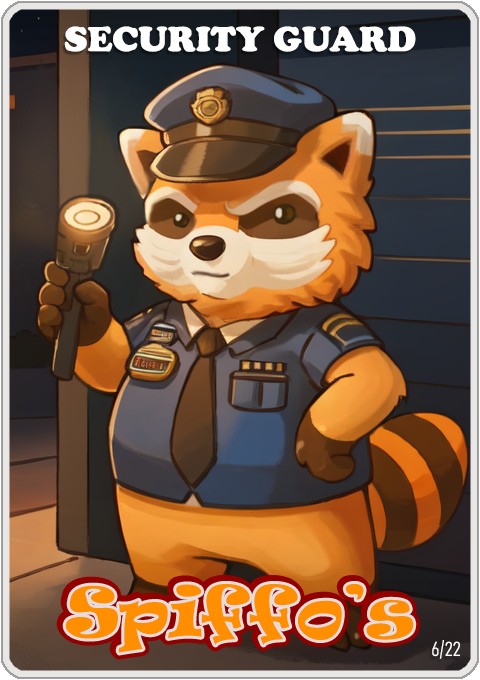
<style>
.page{position:relative;width:480px;height:680px}
.page>*{position:absolute;margin:0}
.t1{font:36px "CooperBlack";color:#ffffff}
.t2{font:65px "Ravie";color:#ff8e00}
.t3{font:20px "Bahnschrift-LightCondensed";color:#ffffff}
</style>
<div class="page">
<p class="t1" style="left:64px;top:26px;width:352px;height:26px">SECURITY GUARD</p>
<p class="t2" style="left:65px;top:584px;width:349px;height:69px">Spiffo’s</p>
<p class="t3" style="left:432px;top:640px;width:28px;height:19px">6/22</p>
</div>
